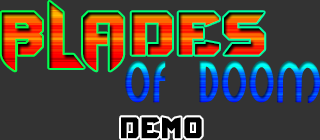
<style>
.page{position:relative;width:320px;height:140px;background:#333333}
.page>*{position:absolute;margin:0}
.t1{font:58.4px "BravoDestroyerPersonalUSE-regular";letter-spacing:0.025em}
.t2{font:45.9px "Minerva";letter-spacing:0.025em}
.t3{font:28.9px "BravoDestroyerPersonalUSE-regular";letter-spacing:0.025em;color:#000000;scale:0.89 1}
</style>
<div class="page">
<p class="t1" style="left:1px;top:1px;width:264px;height:70px">BLADES</p>
<p class="t2" style="left:125px;top:60px;width:195px;height:43px">OF DOOM</p>
<p class="t3" style="left:121px;top:117px;width:81px;height:22px">Demo</p>
</div>
